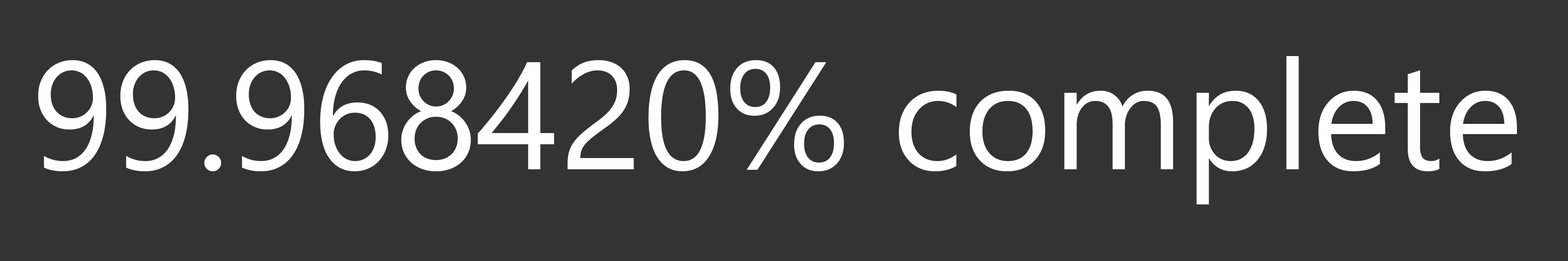
<style>
.page{position:relative;width:1568px;height:261px;background:#333333}
.page>*{position:absolute;margin:0}
.t1{font:153.1px "SegoeUI";color:#ffffff}
</style>
<div class="page">
<p class="t1" style="left:38px;top:56px;width:1479px;height:149px">99.968420% complete</p>
</div>
